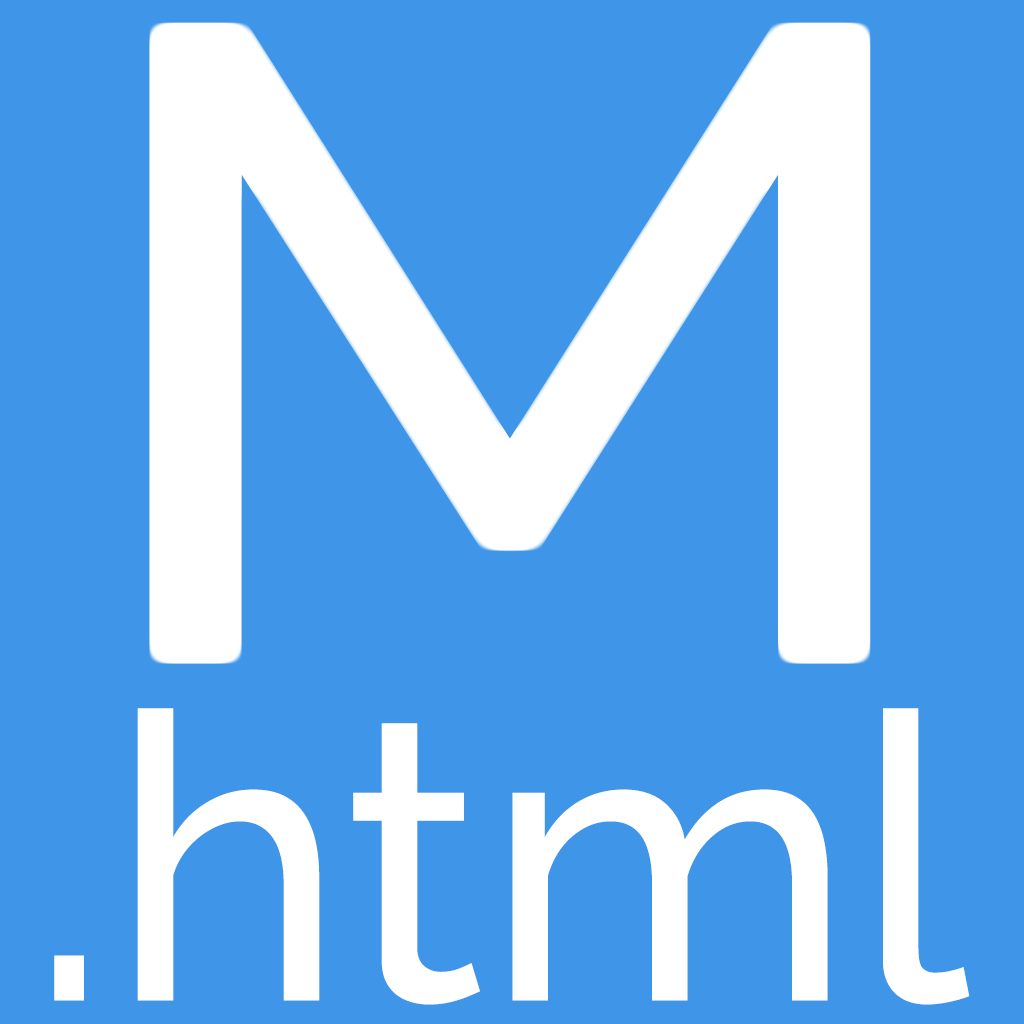
<style>
.page{position:relative;width:1024px;height:1024px;background:#3f95e8}
.page>*{position:absolute;margin:0}
.t1{font:400px "RalewayRoman-Medium";color:#ffffff}
</style>
<div class="page">
<p class="t1" style="left:54px;top:708px;width:916px;height:297px">.html</p>
</div>
